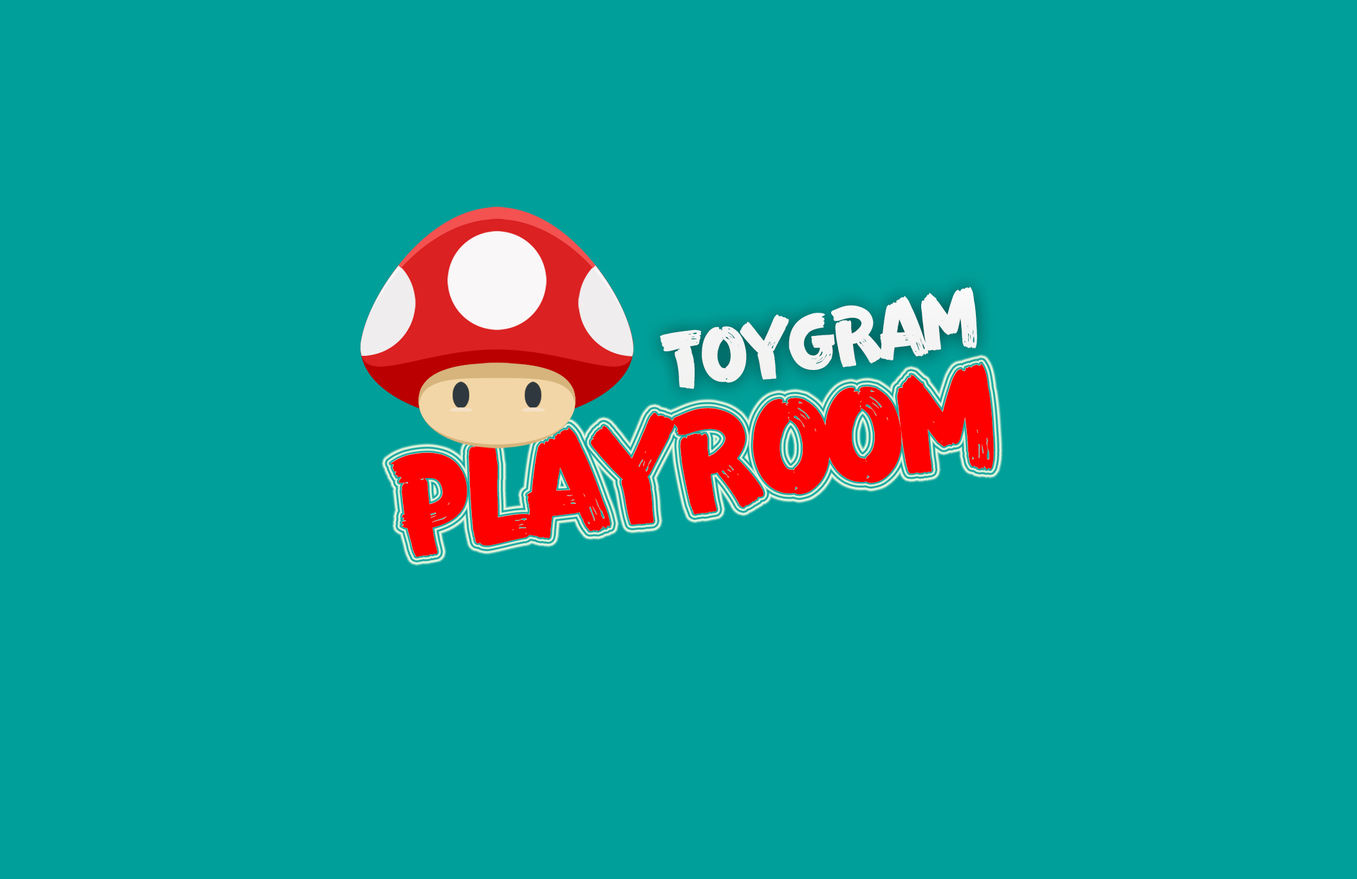
<style>
.page{position:relative;width:1357px;height:879px;background:#019f99}
.page>*{position:absolute;margin:0}
.t1{font:72.5px "FZFENSTXJW--GB1-0";letter-spacing:-0.08em;color:#ffffff}
.t2{font:124.8px "FZFENSTXJW--GB1-0";letter-spacing:-0.08em;color:#ff0000}
</style>
<div class="page">
<p class="t1" style="left:660px;top:286px;width:317px;height:103px;rotate:-9deg">TOYGRAM</p>
<p class="t2" style="left:391px;top:364px;width:603px;height:193px;rotate:-9deg">PLAYROOM</p>
</div>
